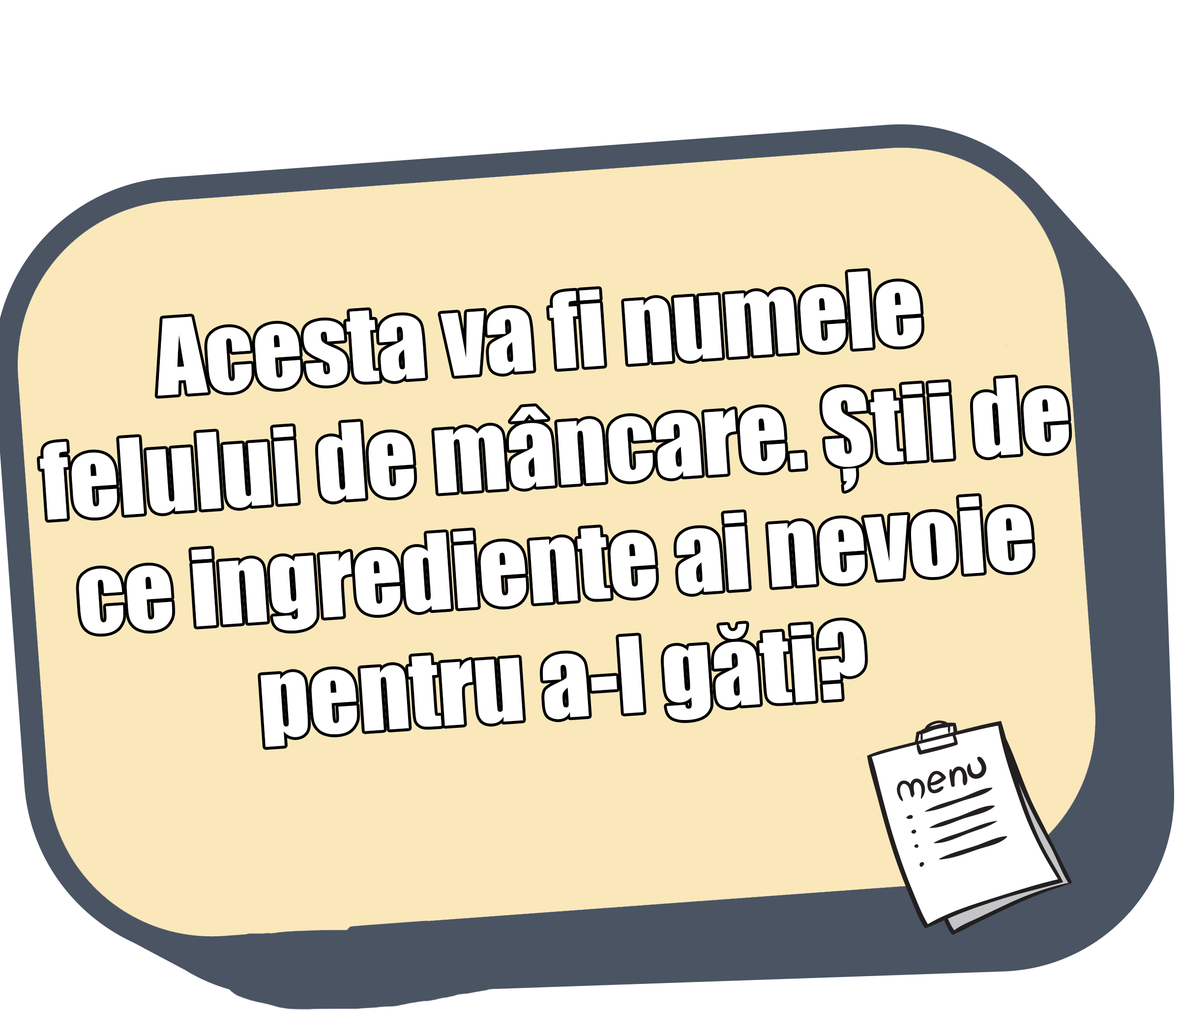
<style>
.page{position:relative;width:1180px;height:1010px;background:#fae8bb}
.page>*{position:absolute;margin:0}
.t1{font:96.9px "Impact";color:#ffffff}
</style>
<div class="page">
<p class="t1" style="left:39px;top:271px;width:1030px;height:476px;text-align:center;rotate:-4deg">Acesta va fi numele<br> felului de mâncare. Știi de <br>ce ingrediente ai nevoie <br>pentru a-l găti?</p>
</div>
